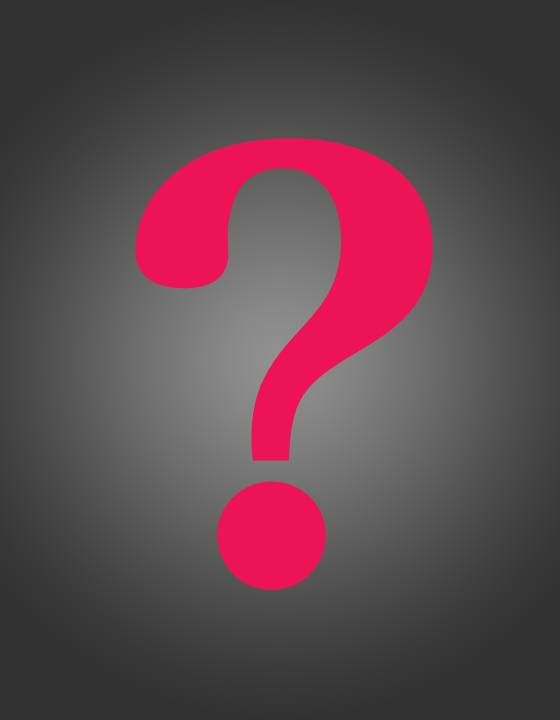
<style>
.page{position:relative;width:560px;height:720px}
.page>*{position:absolute;margin:0}
.t1{font:560px "HiraMinPro-W6";color:#ec1456;font-weight:bold}
</style>
<div class="page">
<p class="t1" style="left:135px;top:138px;width:298px;height:452px">?</p>
</div>
